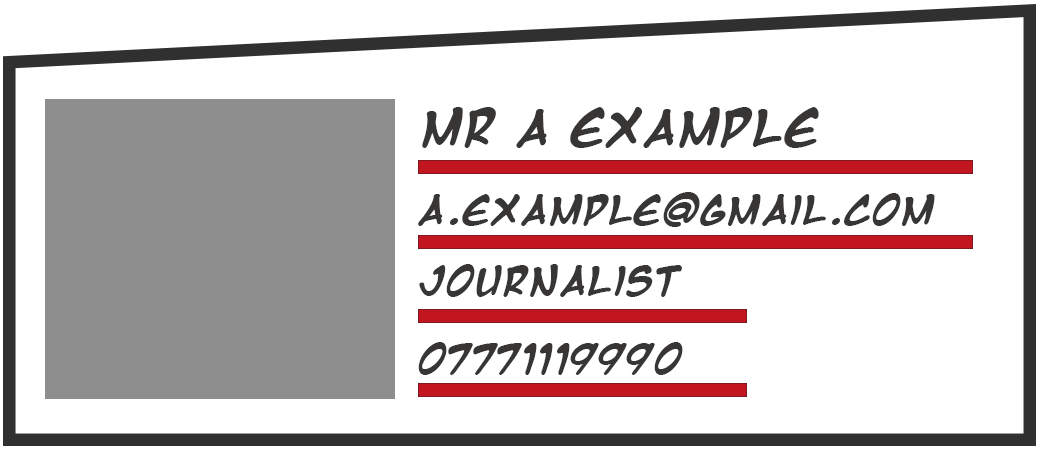
<style>
.page{position:relative;width:1040px;height:450px;background:#ffffff}
.page>*{position:absolute;margin:0}
.t1{font:41.7px "MangaTempleBold";color:#383535}
.t2{font:33.4px "MangaTempleBold";color:#383535}
</style>
<div class="page">
<p class="t1" style="left:422px;top:107px;width:397px;height:41px">Mr A Example</p>
<p class="t2" style="left:418px;top:192px;width:517px;height:35px">A.example@gmail.com</p>
<p class="t2" style="left:419px;top:264px;width:263px;height:33px">Journalist</p>
<p class="t2" style="left:418px;top:342px;width:265px;height:33px">07771119990</p>
</div>
